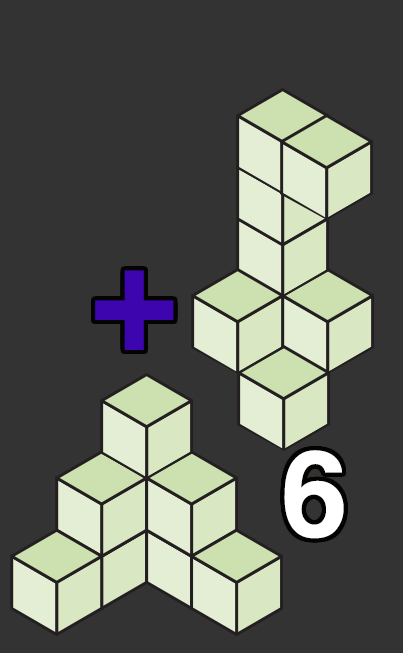
<style>
.page{position:relative;width:403px;height:653px;background:#333333}
.page>*{position:absolute;margin:0}
.t1{font:149.8px "Helvetica-Bold";letter-spacing:-0.006em;color:#3d05ad}
.t2{font:120px "Helvetica-Bold";letter-spacing:-0.006em;color:#ffffff}
</style>
<div class="page">
<p class="t1" style="left:95px;top:270px;width:79px;height:80px">+</p>
<p class="t2" style="left:284px;top:450px;width:60px;height:89px">6</p>
</div>
